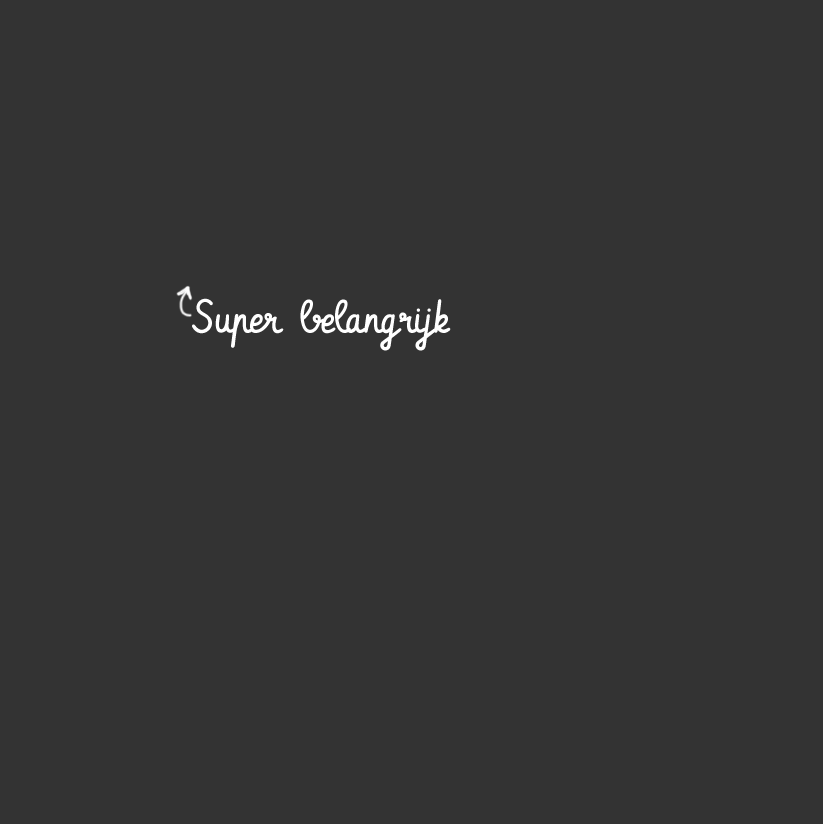
<style>
.page{position:relative;width:823px;height:824px;background:#333333}
.page>*{position:absolute;margin:0}
.t1{font:45px "Vibur";letter-spacing:-0.01em;color:#ffffff}
</style>
<div class="page">
<p class="t1" style="left:192px;top:298px;width:259px;height:53px">Super belangrijk</p>
</div>
